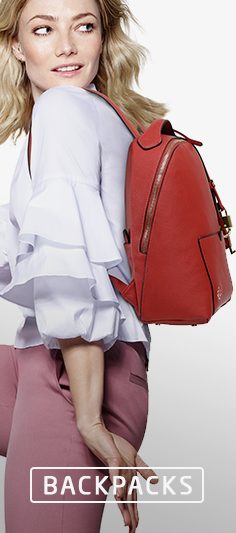
<style>
.page{position:relative;width:236px;height:533px}
.page>*{position:absolute;margin:0}
.t1{font:24px "NeoSansPro-Regular";letter-spacing:0.1em;color:#f5f5f5;font-weight:bold}
</style>
<div class="page">
<p class="t1" style="left:44px;top:476px;width:148px;height:19px">BACKPACKS</p>
</div>
